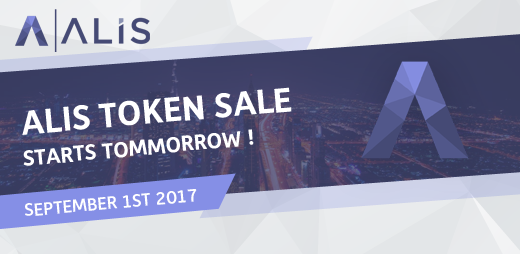
<style>
.page{position:relative;width:520px;height:254px}
.page>*{position:absolute;margin:0}
.t1{font:35px "Depot-Bold";color:#ffffff;text-transform:uppercase}
.t2{font:22px "Depot-Bold";color:#ffffff;text-transform:uppercase}
.t3{font:18px "Depot-Medium";color:#ffffff;text-transform:uppercase}
</style>
<div class="page">
<p class="t1" style="left:22px;top:87px;width:270px;height:48px;rotate:-5deg">Alis token sale</p>
<p class="t2" style="left:23px;top:129px;width:231px;height:37px;rotate:-5deg">Starts tommorrow !</p>
<p class="t3" style="left:25px;top:189px;width:172px;height:27px;rotate:-5deg">September 1st 2017</p>
</div>
